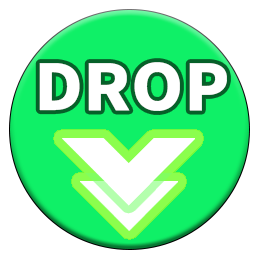
<style>
.page{position:relative;width:259px;height:259px;background:#ffffff}
.page>*{position:absolute;margin:0}
.t1{font:63px "NotoSansCJKkr-Black";letter-spacing:0.01em;color:#ffffff;scale:1.06 1}
</style>
<div class="page">
<p class="t1" style="left:39px;top:62px;width:188px;height:49px">DROP</p>
</div>
